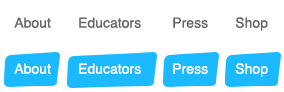
<style>
.page{position:relative;width:284px;height:92px;background:#ffffff}
.page>*{position:absolute;margin:0}
.t1{font:14px "Helvetica";color:#666666}
.t2{font:14px "Helvetica";color:#ffffff}
</style>
<div class="page">
<p class="t1" style="left:14px;top:17px;width:254px;height:14px">About       Educators        Press       Shop</p>
<p class="t2" style="left:14px;top:63px;width:254px;height:14px">About       Educators        Press       Shop</p>
</div>
